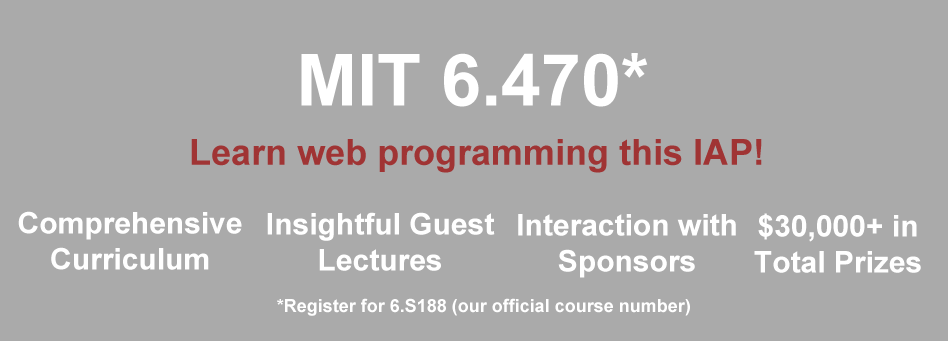
<style>
.page{position:relative;width:948px;height:341px;background:#aaaaaa}
.page>*{position:absolute;margin:0}
.t1{font:72px "Arial-BoldMT";color:#ffffff}
.t2{font:36px "Arial-BoldMT";color:#a03434}
.t3{font:30px "Arial-BoldMT";color:#ffffff}
.t4{font:18px "Arial-BoldMT";color:#ffffff}
.t5{font:18px "Arial-BoldMT";letter-spacing:-0.08em;color:#ffffff}
</style>
<div class="page">
<p class="t1" style="left:301px;top:53px;width:347px;height:54px">MIT 6.470*</p>
<p class="t2" style="left:191px;top:139px;width:571px;height:34px">Learn web programming this IAP!</p>
<p class="t3" style="left:18px;top:211px;width:224px;height:59px;text-align:center">Comprehensive<br>Curriculum</p>
<p class="t3" style="left:267px;top:212px;width:228px;height:59px;text-align:center">Insightful Guest<br>Lectures</p>
<p class="t3" style="left:518px;top:214px;width:218px;height:64px;text-align:center">Interaction with Sponsors</p>
<p class="t3" style="left:754px;top:213px;width:167px;height:60px;text-align:center">$30,000+ in Total Prizes</p>
<p class="t4" style="left:277px;top:298px;width:413px;height:18px">*Register for 6.S188 (our official course number<span class="t5">)</span></p>
</div>
